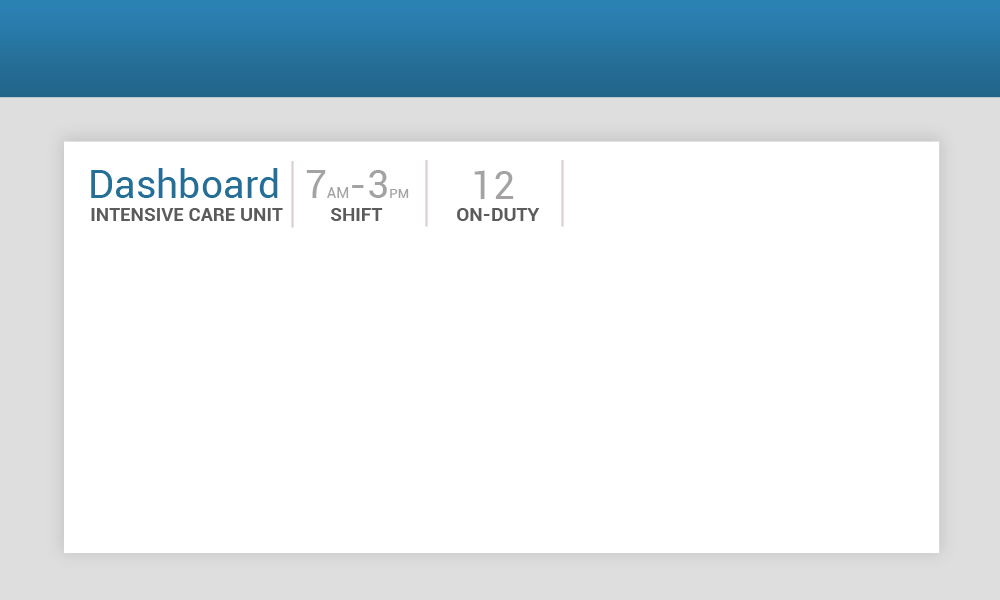
<style>
.page{position:relative;width:1000px;height:600px;background:#ffffff}
.page>*{position:absolute;margin:0}
.t1{font:77px "Roboto-Bold";color:#d9d0d0;scale:0.26 1}
.t2{font:39.2px "Roboto-Regular";color:#256e97}
.t3{font:15.2px "Roboto-Regular";color:#a4a2a2}
.t4{font:39.2px "Roboto-Regular";color:#a4a2a2}
.t5{font:13.2px "Roboto-Regular";color:#a4a2a2}
.t6{font:19px "Roboto-Bold";color:#5b5b5b}
</style>
<div class="page">
<p class="t1" style="left:291px;top:161px;width:3px;height:67px">|</p>
<p class="t1" style="left:425px;top:160px;width:3px;height:67px">|</p>
<p class="t1" style="left:561px;top:160px;width:3px;height:67px">|</p>
<p class="t2" style="left:91px;top:168px;width:187px;height:30px">Dashboard</p>
<p class="t3" style="left:306px;top:170px;width:103px;height:28px"><span class="t4">7</span>AM<span class="t4">-3</span><span class="t5">PM</span></p>
<p class="t4" style="left:474px;top:170px;width:40px;height:29px">12</p>
<p class="t6" style="left:91px;top:208px;width:192px;height:13px">INTENSIVE CARE UNIT</p>
<p class="t6" style="left:331px;top:208px;width:52px;height:13px">SHIFT</p>
<p class="t6" style="left:457px;top:208px;width:83px;height:13px">ON-DUTY</p>
</div>
